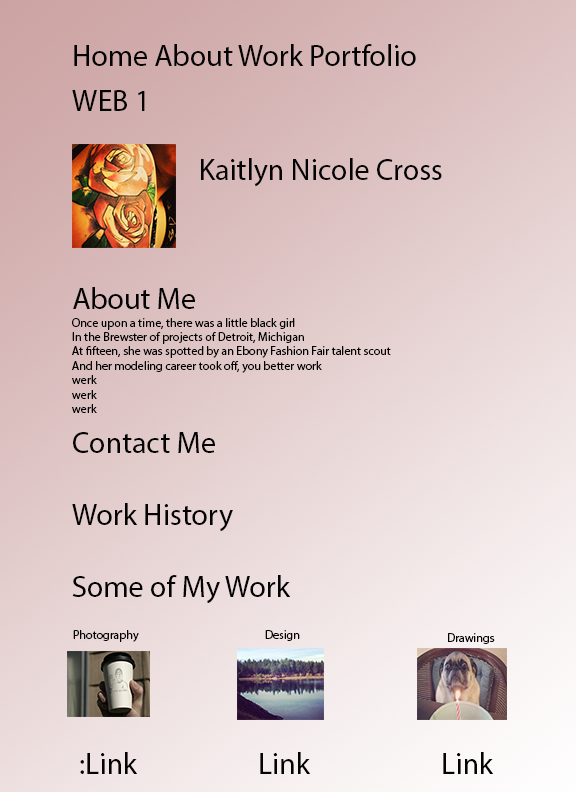
<style>
.page{position:relative;width:576px;height:792px}
.page>*{position:absolute;margin:0}
.t1{font:30px "MyriadPro-Regular";color:#030303}
.t2{font:12px "MyriadPro-Regular";color:#030303}
</style>
<div class="page">
<p class="t1" style="left:74px;top:44px;width:342px;height:22px">Home About Work Portfolio</p>
<p class="t1" style="left:72px;top:90px;width:73px;height:21px">WEB 1</p>
<p class="t1" style="left:201px;top:158px;width:241px;height:29px">Kaitlyn Nicole Cross</p>
<p class="t1" style="left:73px;top:287px;width:122px;height:22px">About Me</p>
<p class="t2" style="left:72px;top:318px;width:319px;height:95px">Once upon a time, there was a little black girl<br>In the Brewster of projects of Detroit, Michigan<br>At fifteen, she was spotted by an Ebony Fashion Fair talent scout<br>And her modeling career took off, you better work<br>werk<br>werk<br>werk</p>
<p class="t1" style="left:73px;top:432px;width:142px;height:21px">Contact Me</p>
<p class="t1" style="left:72px;top:503px;width:161px;height:29px">Work History</p>
<p class="t1" style="left:72px;top:575px;width:219px;height:29px">Some of My Work</p>
<p class="t2" style="left:73px;top:630px;width:66px;height:12px">Photography</p>
<p class="t2" style="left:265px;top:630px;width:35px;height:11px">Design</p>
<p class="t2" style="left:448px;top:633px;width:47px;height:11px">Drawings</p>
<p class="t1" style="left:80px;top:752px;width:58px;height:22px">:Link</p>
<p class="t1" style="left:260px;top:752px;width:51px;height:22px">Link</p>
<p class="t1" style="left:443px;top:752px;width:51px;height:22px">Link</p>
</div>
